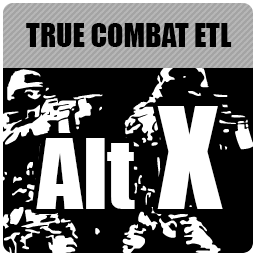
<style>
.page{position:relative;width:256px;height:256px;background:#000000}
.page>*{position:absolute;margin:0}
.t1{font:30px "Impact";color:#000000}
.t2{font:90px "Impact";color:#ffffff}
.t3{font:130px "Impact";color:#ffffff}
</style>
<div class="page">
<p class="t1" style="left:26px;top:23px;width:206px;height:24px">TRUE COMBAT ETL</p>
<p class="t2" style="left:36px;top:106px;width:187px;height:103px">Alt<span class="t3"> X</span></p>
</div>
